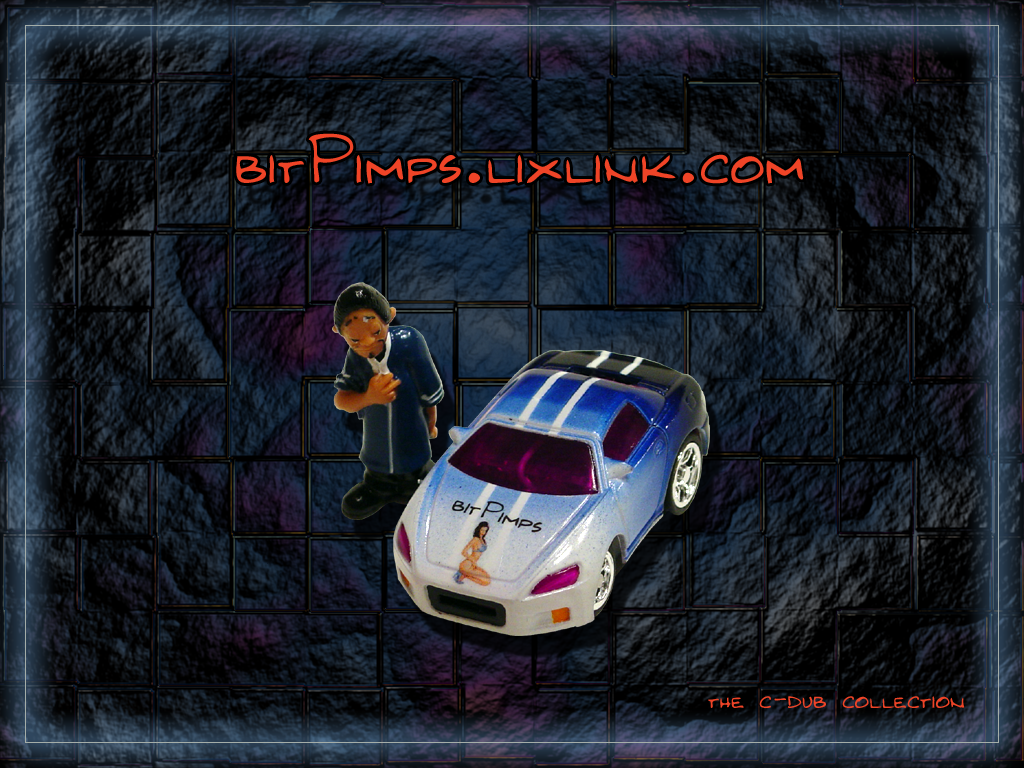
<style>
.page{position:relative;width:1024px;height:768px}
.page>*{position:absolute;margin:0}
.t1{font:72px "Kilroy-WasHere";color:#ef4427}
.t2{font:30px "Kilroy-WasHere";color:#ef4427}
</style>
<div class="page">
<p class="t1" style="left:236px;top:133px;width:568px;height:51px">bitPimps.lixlink.com</p>
<p class="t2" style="left:708px;top:696px;width:257px;height:12px">the c-dub collection</p>
</div>
